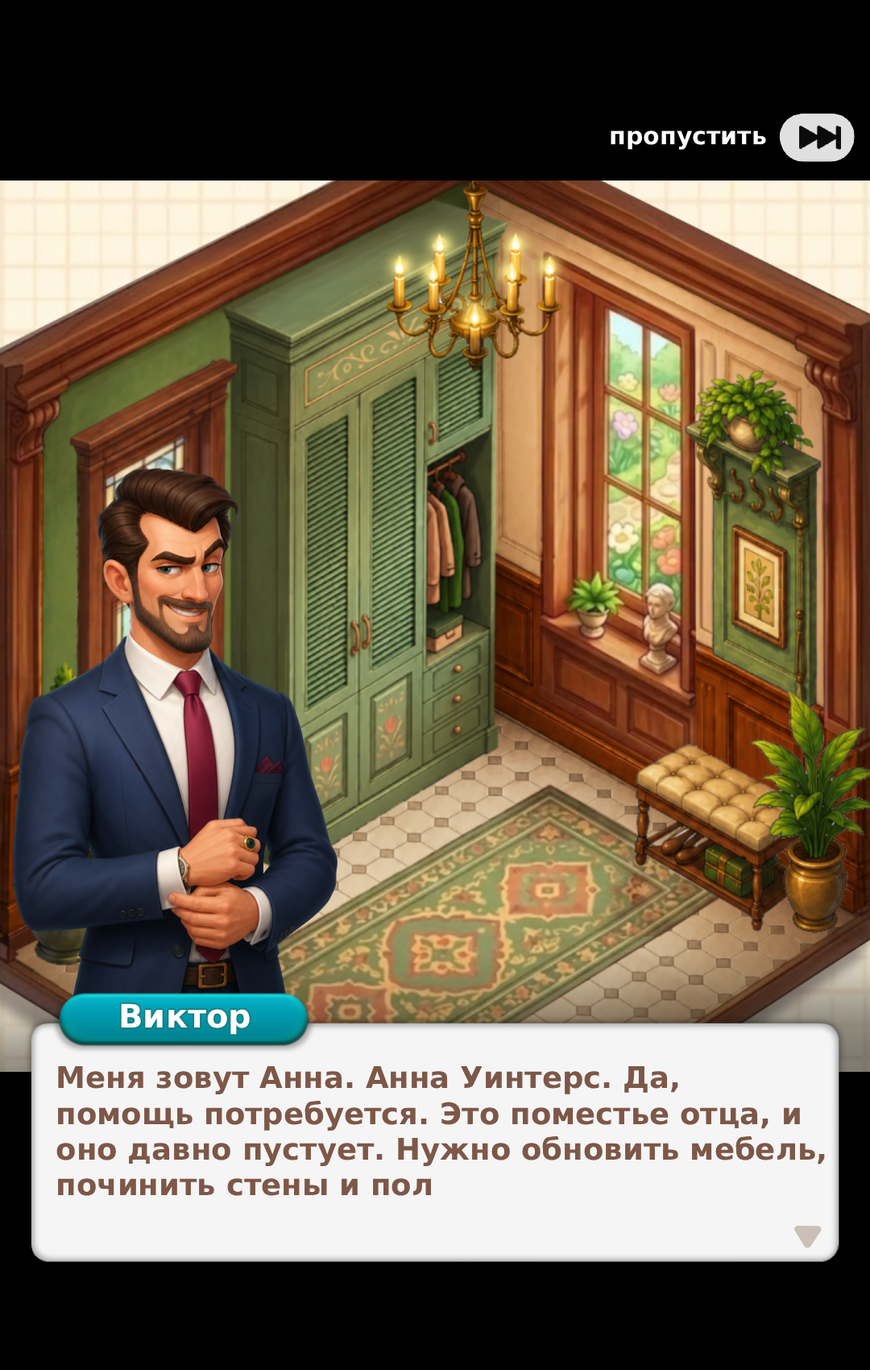
<style>
.page{position:relative;width:870px;height:1370px;background:#000000}
.page>*{position:absolute;margin:0}
.t1{font:24.2px "DejaVuSans-Bold";color:#ffffff}
.t2{font:32.2px "DejaVuSans-Bold";color:#ffffff}
.t3{font:29.8px "DejaVuSans-Bold";color:#7d5747}
</style>
<div class="page">
<p class="t1" style="left:611px;top:131px;width:155px;height:19px">пропустить</p>
<p class="t2" style="left:121px;top:1003px;width:129px;height:32px">Виктор</p>
<p class="t3" style="left:56px;top:1066px;width:769px;height:130px">Меня зовут Анна. Анна Уинтерс. Да, <br>помощь потребуется. Это поместье отца, и<br>оно давно пустует. Нужно обновить мебель,<br>починить стены и пол</p>
</div>
